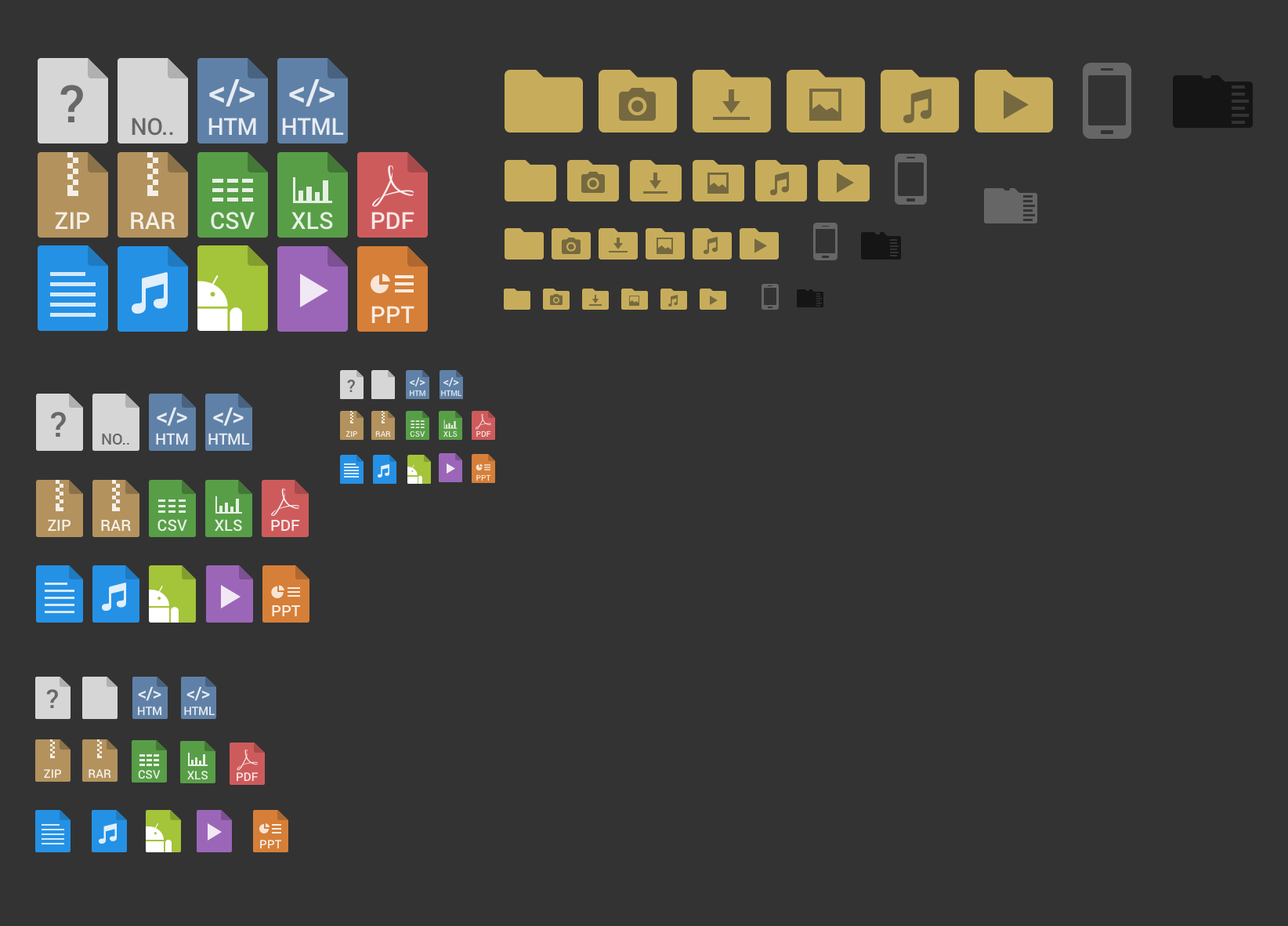
<style>
.page{position:relative;width:1288px;height:926px;background:#333333}
.page>*{position:absolute;margin:0}
.t1{font:51.7px "Roboto-Medium";letter-spacing:-0.04em;color:#555555;text-transform:uppercase}
.t2{font:35.3px "Roboto-Medium";letter-spacing:-0.04em;color:#ffffff;text-transform:uppercase}
.t3{font:35.3px "Roboto-Medium";letter-spacing:-0.06em;color:#ffffff;text-transform:uppercase}
.t4{font:35.3px "Roboto-Medium";letter-spacing:-0.02em;color:#ffffff;text-transform:uppercase}
.t5{font:23.5px "Roboto-Medium";letter-spacing:-0.01em;color:#555555;text-transform:uppercase}
.t6{font:23.5px "Roboto-Medium";letter-spacing:-0.01em;color:#ffffff;text-transform:uppercase}
.t7{font:23.5px "Roboto-Medium";color:#ffffff;text-transform:uppercase}
.t8{font:23.5px "Roboto-Medium";color:#e6f1e4;text-transform:uppercase}
.t9{font:23.5px "Roboto-Medium";color:#f9ece1;text-transform:uppercase}
.t10{font:11.8px "Roboto-Medium";letter-spacing:-0.04em;color:#ffffff;text-transform:uppercase}
.t11{font:11.8px "Roboto-Medium";letter-spacing:-0.06em;color:#ffffff;text-transform:uppercase}
.t12{font:11.8px "Roboto-Medium";letter-spacing:-0.02em;color:#ffffff;text-transform:uppercase}
.t13{font:17.2px "Roboto-Medium";letter-spacing:-0.04em;color:#555555;text-transform:uppercase}
.t14{font:7.8px "Roboto-Medium";letter-spacing:-0.01em;color:#ffffff;text-transform:uppercase}
.t15{font:34.5px "Roboto-Medium";letter-spacing:-0.04em;color:#555555;text-transform:uppercase}
.t16{font:23.5px "Roboto-Medium";letter-spacing:-0.04em;color:#ffffff;text-transform:uppercase}
.t17{font:23.5px "Roboto-Medium";letter-spacing:-0.06em;color:#ffffff;text-transform:uppercase}
.t18{font:23.5px "Roboto-Medium";letter-spacing:-0.02em;color:#ffffff;text-transform:uppercase}
.t19{font:15.7px "Roboto-Medium";letter-spacing:-0.01em;color:#555555;text-transform:uppercase}
.t20{font:15.7px "Roboto-Medium";letter-spacing:-0.01em;color:#ffffff;text-transform:uppercase}
.t21{font:7.8px "Roboto-Medium";color:#f4efe7;text-transform:uppercase}
.t22{font:7.8px "Roboto-Medium";color:#e6f1e4;text-transform:uppercase}
.t23{font:7.8px "Roboto-Medium";color:#f8e7e7;text-transform:uppercase}
.t24{font:7.8px "Roboto-Medium";color:#f9ece1;text-transform:uppercase}
.t25{font:15.7px "Roboto-Medium";color:#ffffff;text-transform:uppercase}
.t26{font:15.7px "Roboto-Medium";color:#e6f1e4;text-transform:uppercase}
.t27{font:15.7px "Roboto-Medium";color:#f9ece1;text-transform:uppercase}
.t28{font:25.9px "Roboto-Medium";letter-spacing:-0.04em;color:#555555;text-transform:uppercase}
.t29{font:17.6px "Roboto-Medium";letter-spacing:-0.04em;color:#ffffff;text-transform:uppercase}
.t30{font:17.6px "Roboto-Medium";letter-spacing:-0.06em;color:#ffffff;text-transform:uppercase}
.t31{font:17.6px "Roboto-Medium";letter-spacing:-0.02em;color:#ffffff;text-transform:uppercase}
.t32{font:11.8px "Roboto-Medium";letter-spacing:-0.01em;color:#ffffff;text-transform:uppercase}
.t33{font:11.8px "Roboto-Medium";letter-spacing:-0.019em;color:#ffffff;text-transform:uppercase}
.t34{font:11.8px "Roboto-Medium";color:#ffffff;text-transform:uppercase}
.t35{font:11.8px "Roboto-Medium";color:#e6f1e4;text-transform:uppercase}
.t36{font:11.8px "Roboto-Medium";color:#f9ece1;text-transform:uppercase}
</style>
<div class="page">
<p class="t1" style="left:60px;top:85px;width:23px;height:37px;opacity:0.85">?</p>
<p class="t2" style="left:209px;top:79px;width:46px;height:28px;opacity:0.85">&lt;<span class="t3">/</span><span class="t4">&gt;</span></p>
<p class="t2" style="left:289px;top:79px;width:46px;height:28px;opacity:0.85">&lt;<span class="t3">/</span><span class="t4">&gt;</span></p>
<p class="t5" style="left:132px;top:118px;width:41px;height:18px;opacity:0.85">no..</p>
<p class="t6" style="left:208px;top:118px;width:48px;height:17px;opacity:0.85">htm</p>
<p class="t6" style="left:282px;top:118px;width:62px;height:17px;opacity:0.85">html</p>
<p class="t7" style="left:55px;top:212px;width:35px;height:17px;opacity:0.85">zip</p>
<p class="t7" style="left:131px;top:212px;width:45px;height:17px;opacity:0.85">rar</p>
<p class="t8" style="left:211px;top:212px;width:44px;height:18px">CSV</p>
<p class="t8" style="left:292px;top:212px;width:41px;height:18px">xls</p>
<p class="t7" style="left:371px;top:212px;width:44px;height:17px;opacity:0.85">pdf</p>
<p class="t9" style="left:371px;top:306px;width:44px;height:17px">ppt</p>
<p class="t10" style="left:410px;top:377px;width:16px;height:9px;opacity:0.85">&lt;<span class="t11">/</span><span class="t12">&gt;</span></p>
<p class="t10" style="left:444px;top:377px;width:15px;height:9px;opacity:0.85">&lt;<span class="t11">/</span><span class="t12">&gt;</span></p>
<p class="t13" style="left:347px;top:379px;width:8px;height:13px;opacity:0.85">?</p>
<p class="t14" style="left:410px;top:389px;width:16px;height:7px;opacity:0.85">htm</p>
<p class="t14" style="left:441px;top:389px;width:21px;height:7px;opacity:0.85">html</p>
<p class="t15" style="left:51px;top:411px;width:15px;height:26px;opacity:0.85">?</p>
<p class="t16" style="left:157px;top:407px;width:30px;height:19px;opacity:0.85">&lt;<span class="t17">/</span><span class="t18">&gt;</span></p>
<p class="t16" style="left:213px;top:407px;width:31px;height:19px;opacity:0.85">&lt;<span class="t17">/</span><span class="t18">&gt;</span></p>
<p class="t19" style="left:102px;top:433px;width:27px;height:11px;opacity:0.85">no..</p>
<p class="t20" style="left:156px;top:433px;width:32px;height:11px;opacity:0.85">htm</p>
<p class="t20" style="left:208px;top:433px;width:41px;height:11px;opacity:0.85">html</p>
<p class="t21" style="left:346px;top:430px;width:11px;height:7px">zip</p>
<p class="t21" style="left:375px;top:430px;width:16px;height:7px">rar</p>
<p class="t22" style="left:410px;top:430px;width:16px;height:7px">CSV</p>
<p class="t22" style="left:444px;top:430px;width:14px;height:7px">xls</p>
<p class="t23" style="left:476px;top:430px;width:15px;height:7px">pdf</p>
<p class="t24" style="left:476px;top:474px;width:15px;height:6px">ppt</p>
<p class="t25" style="left:48px;top:519px;width:23px;height:12px;opacity:0.85">zip</p>
<p class="t25" style="left:101px;top:520px;width:30px;height:11px;opacity:0.85">rar</p>
<p class="t26" style="left:158px;top:519px;width:29px;height:12px">CSV</p>
<p class="t26" style="left:215px;top:519px;width:27px;height:12px">xls</p>
<p class="t25" style="left:271px;top:520px;width:29px;height:11px;opacity:0.85">pdf</p>
<p class="t27" style="left:272px;top:605px;width:28px;height:11px">ppt</p>
<p class="t28" style="left:46px;top:689px;width:12px;height:19px;opacity:0.85">?</p>
<p class="t29" style="left:138px;top:687px;width:23px;height:14px;opacity:0.85">&lt;<span class="t30">/</span><span class="t31">&gt;</span></p>
<p class="t29" style="left:187px;top:687px;width:23px;height:14px;opacity:0.85">&lt;<span class="t30">/</span><span class="t31">&gt;</span></p>
<p class="t32" style="left:138px;top:706px;width:23px;height:9px;opacity:0.85">htm</p>
<p class="t33" style="left:184px;top:706px;width:31px;height:9px;opacity:0.85">html</p>
<p class="t34" style="left:44px;top:769px;width:18px;height:8px;opacity:0.85">zip</p>
<p class="t34" style="left:89px;top:769px;width:22px;height:8px;opacity:0.85">rar</p>
<p class="t35" style="left:138px;top:770px;width:23px;height:9px">CSV</p>
<p class="t35" style="left:187px;top:770px;width:21px;height:10px">xls</p>
<p class="t34" style="left:237px;top:772px;width:21px;height:9px;opacity:0.85">pdf</p>
<p class="t36" style="left:260px;top:839px;width:22px;height:9px">ppt</p>
</div>
